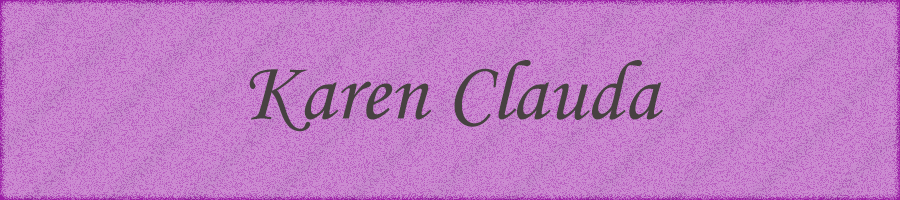
<style>
.page{position:relative;width:900px;height:200px;background:#cc8cd1}
.page>*{position:absolute;margin:0}
.t1{font:85px "MonotypeCorsiva";color:#474141}
</style>
<div class="page">
<p class="t1" style="left:249px;top:60px;width:414px;height:72px">Karen Clauda</p>
</div>
